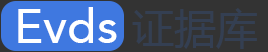
<style>
.page{position:relative;width:268px;height:52px;background:#333333}
.page>*{position:absolute;margin:0}
.t1{font:48px "AvenirLT-Medium";color:#ffffff}
.t2{font:42px "MicrosoftYaHei";color:#343f52}
</style>
<div class="page">
<p class="t1" style="left:18px;top:7px;width:99px;height:36px">Evds</p>
<p class="t2" style="left:132px;top:8px;width:125px;height:41px">证据库</p>
</div>
